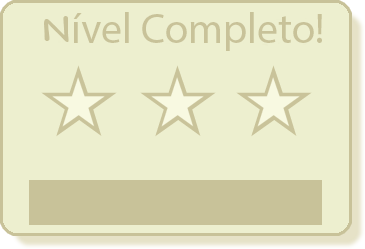
<style>
.page{position:relative;width:365px;height:249px;background:#edefcf}
.page>*{position:absolute;margin:0}
.t1{font:42.7px "MyriadPro-Regular";color:#c8c299}
.t2{font:42.7px "Andy-Bold";color:#c8c299}
</style>
<div class="page">
<p class="t1" style="left:44px;top:12px;width:278px;height:39px"><span class="t2">N</span>ível Completo!</p>
</div>
